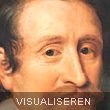
<style>
.page{position:relative;width:110px;height:110px}
.page>*{position:absolute;margin:0}
.t1{font:10px "ArialMT";color:#e2d4cc}
</style>
<div class="page">
<p class="t1" style="left:16px;top:98px;width:74px;height:7px">VISUALISEREN</p>
</div>
